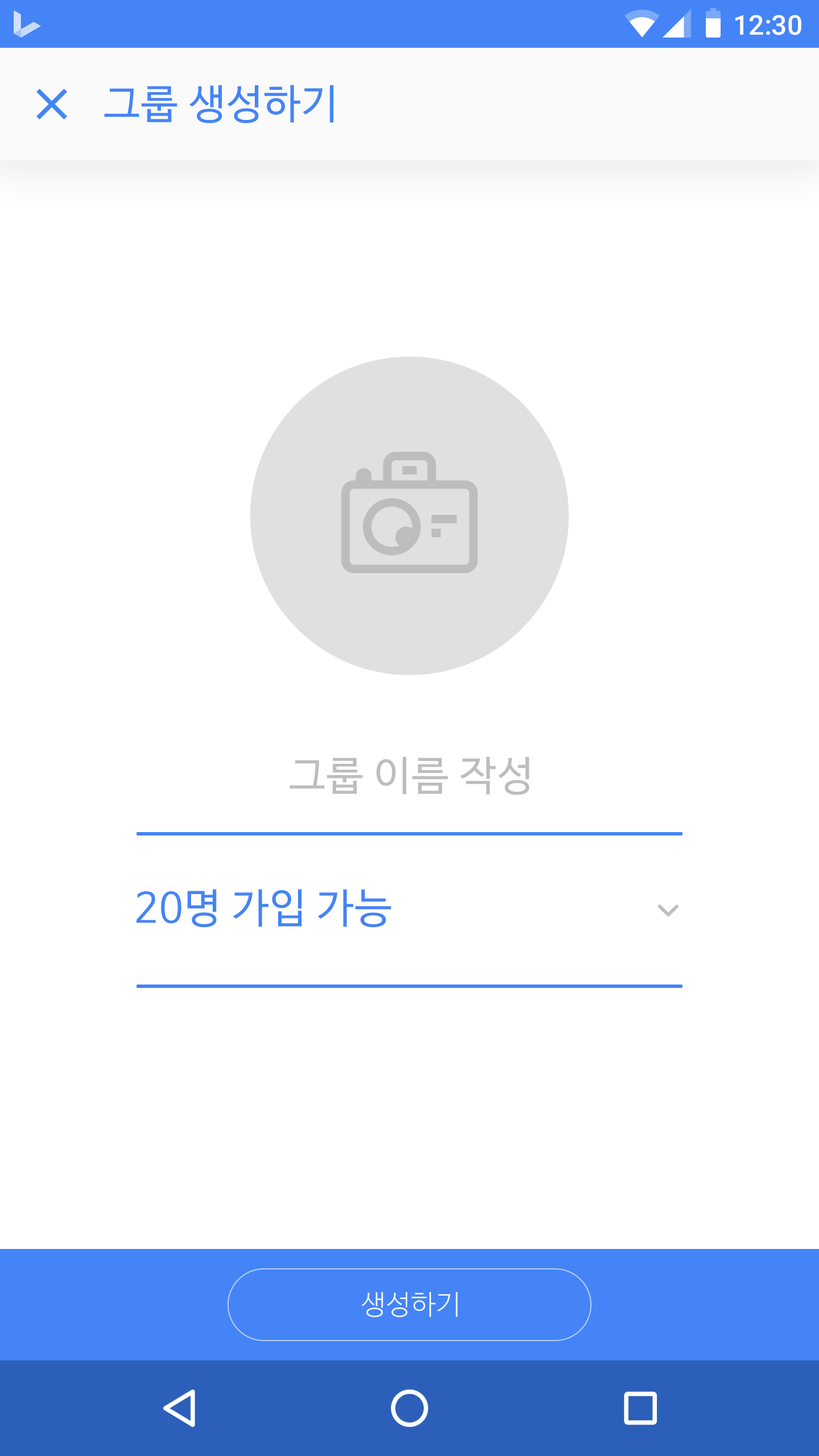
<style>
.page{position:relative;width:819px;height:1456px;background:#ffffff}
.page>*{position:absolute;margin:0}
.t1{font:27.3px "Roboto-Medium";color:#ffffff}
.t2{font:40.9px "NanumBarunGothic";letter-spacing:0.025em;color:#4484f6}
.t3{font:40.9px "NanumBarunGothic";letter-spacing:0.025em;color:#bdbdbd}
.t4{font:27.3px "NanumBarunGothicLight";letter-spacing:0.025em;color:#fafafa}
</style>
<div class="page">
<p class="t1" style="left:735px;top:15px;width:66px;height:20px">12:30</p>
<p class="t2" style="left:104px;top:85px;width:230px;height:38px">그룹 생성하기</p>
<p class="t3" style="left:289px;top:756px;width:240px;height:39px">그룹 이름 작성</p>
<p class="t2" style="left:136px;top:889px;width:255px;height:39px">20명 가입 가능</p>
<p class="t4" style="left:362px;top:1292px;width:96px;height:25px">생성하기</p>
</div>
